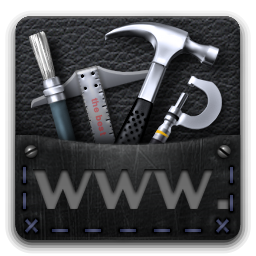
<style>
.page{position:relative;width:256px;height:256px}
.page>*{position:absolute;margin:0}
.t1{font:68.7px "CharcoalCY";color:#676767}
</style>
<div class="page">
<p class="t1" style="left:32px;top:169px;width:197px;height:40px">www.</p>
</div>
